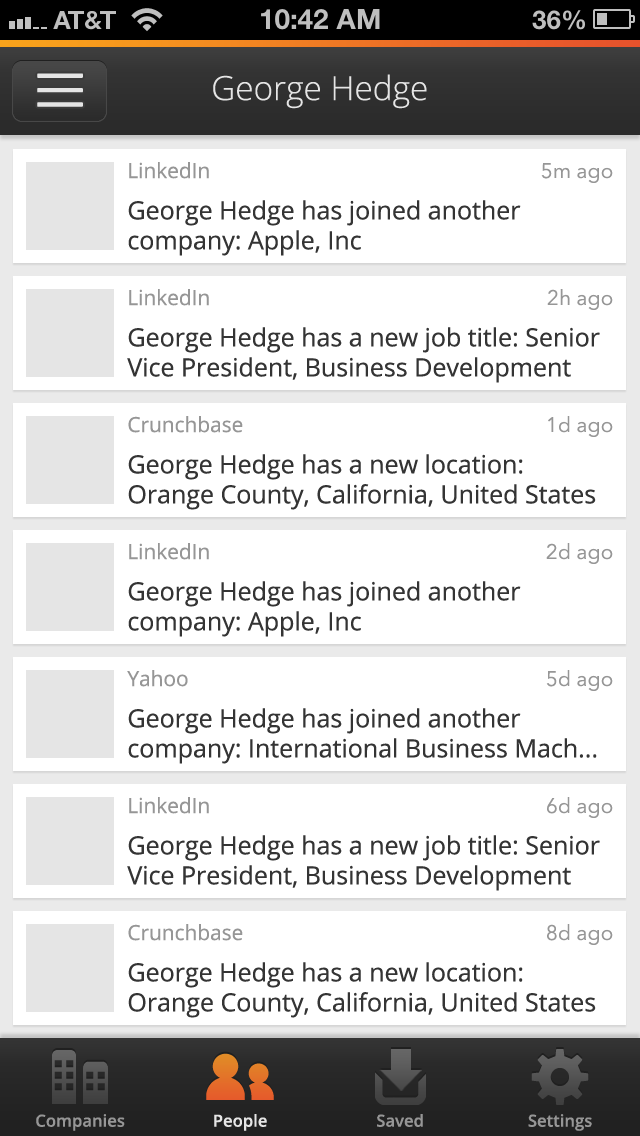
<style>
.page{position:relative;width:640px;height:1136px;background:#ffffff}
.page>*{position:absolute;margin:0}
.t1{font:33.3px "OpenSans-Light";color:#e5e5e5}
.t2{font:25px "OpenSans";color:#343434}
.t3{font:20.8px "OpenSans";color:#969696}
.t4{font:20.8px "AvenirNext-Regular";color:#969696}
.t5{font:16.7px "OpenSans-Semibold";color:#969696}
.t6{font:16.7px "OpenSans-Semibold";color:#e5e5e5}
</style>
<div class="page">
<p class="t1" style="left:213px;top:74px;width:214px;height:35px">George Hedge</p>
<p class="t2" style="left:128px;top:162px;width:393px;height:94px"><span class="t3">LinkedIn<br></span>George Hedge has joined another company: Apple, Inc</p>
<p class="t4" style="left:541px;top:163px;width:72px;height:20px">5m ago</p>
<p class="t2" style="left:127px;top:289px;width:473px;height:94px"><span class="t3">LinkedIn<br></span>George Hedge has a new job title: Senior Vice President, Business Development</p>
<p class="t4" style="left:547px;top:289px;width:66px;height:21px">2h ago</p>
<p class="t2" style="left:128px;top:416px;width:468px;height:94px"><span class="t3">Crunchbase<br></span>George Hedge has a new location: Orange County, California, United States</p>
<p class="t4" style="left:548px;top:416px;width:65px;height:21px">1d ago</p>
<p class="t2" style="left:128px;top:543px;width:393px;height:94px"><span class="t3">LinkedIn<br></span>George Hedge has joined another company: Apple, Inc</p>
<p class="t4" style="left:546px;top:543px;width:67px;height:21px">2d ago</p>
<p class="t2" style="left:127px;top:670px;width:470px;height:94px"><span class="t3">Yahoo<br></span>George Hedge has joined another company: International Business Mach...</p>
<p class="t4" style="left:546px;top:670px;width:67px;height:21px">5d ago</p>
<p class="t2" style="left:127px;top:797px;width:473px;height:94px"><span class="t3">LinkedIn<br></span>George Hedge has a new job title: Senior Vice President, Business Development</p>
<p class="t4" style="left:547px;top:797px;width:66px;height:21px">6d ago</p>
<p class="t2" style="left:128px;top:924px;width:468px;height:94px"><span class="t3">Crunchbase<br></span>George Hedge has a new location: Orange County, California, United States</p>
<p class="t4" style="left:547px;top:924px;width:66px;height:21px">8d ago</p>
<p class="t5" style="left:36px;top:1114px;width:89px;height:17px">Companies</p>
<p class="t6" style="left:214px;top:1114px;width:53px;height:17px">People</p>
<p class="t5" style="left:377px;top:1114px;width:46px;height:13px">Saved</p>
<p class="t5" style="left:528px;top:1114px;width:64px;height:17px">Settings</p>
</div>
